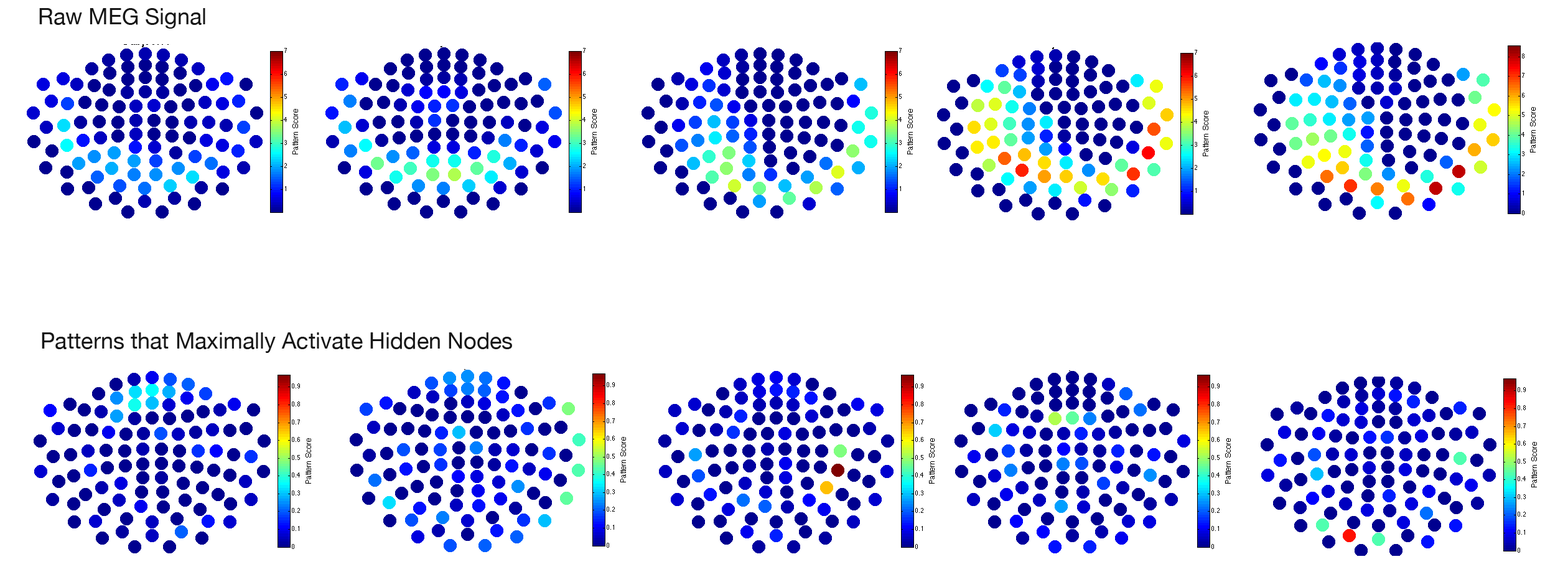
<style>
.page{position:relative;width:1568px;height:577px;background:#ffffff}
.page>*{position:absolute;margin:0}
.t1{font:22.4px "HelveticaNeue";color:#161616}
</style>
<div class="page">
<p class="t1" style="left:39px;top:8px;width:166px;height:21px">Raw MEG Signal</p>
<p class="t1" style="left:42px;top:332px;width:470px;height:21px">Patterns that Maximally Activate Hidden Nodes</p>
</div>
